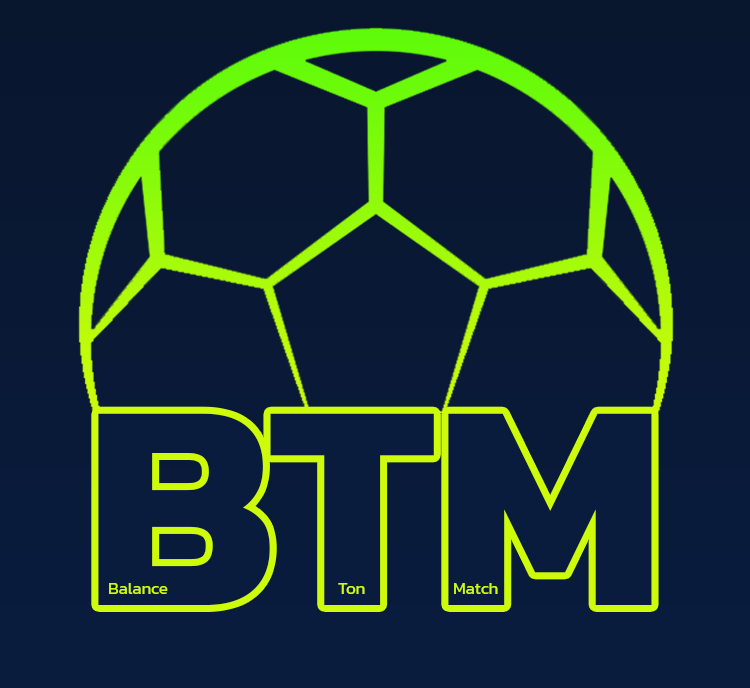
<style>
.page{position:relative;width:750px;height:688px}
.page>*{position:absolute;margin:0}
.t1{font:296.5px "Kanit-Bold";color:#091c3e}
.t2{font:16.7px "Kanit-Regular";color:#cdfb0a}
</style>
<div class="page">
<p class="t1" style="left:98px;top:413px;width:554px;height:192px">BTM</p>
<p class="t2" style="left:109px;top:583px;width:59px;height:11px">Balance</p>
<p class="t2" style="left:338px;top:583px;width:27px;height:11px">Ton</p>
<p class="t2" style="left:454px;top:583px;width:44px;height:11px">Match</p>
</div>
